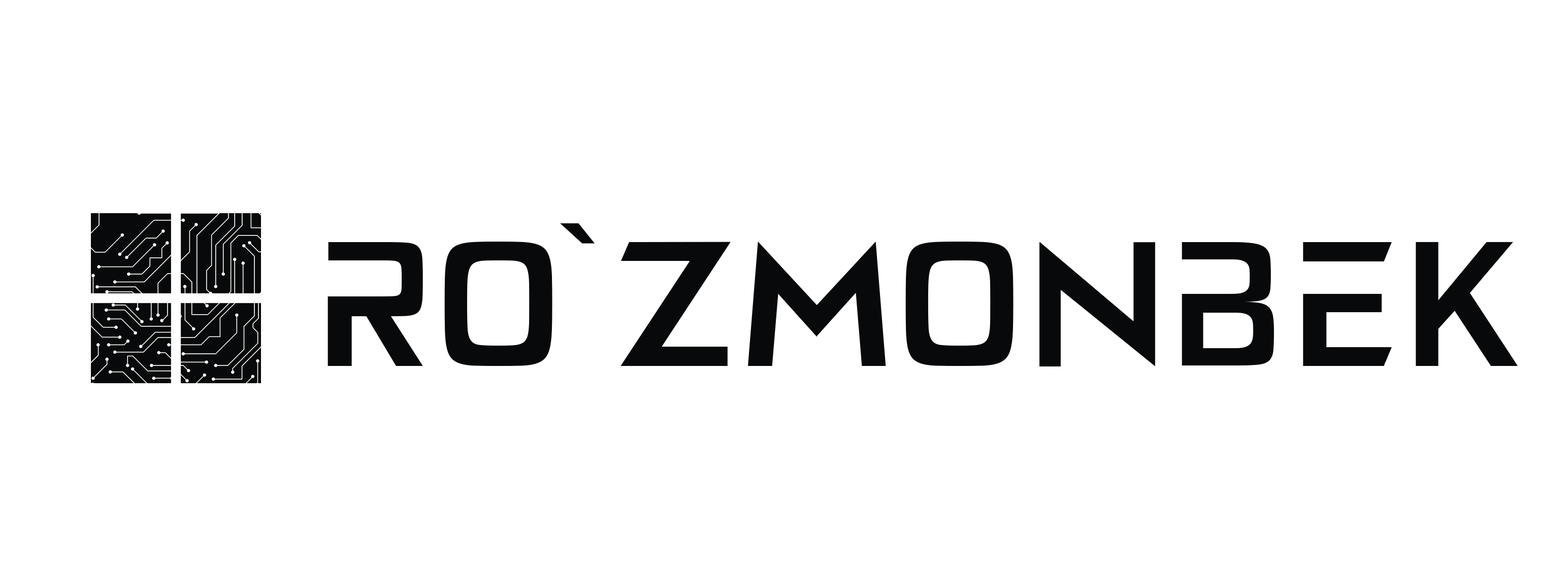
<style>
.page{position:relative;width:1568px;height:571px;background:#ffffff}
.page>*{position:absolute;margin:0}
.t1{font:172.6px "ELNATH";color:#08090a;text-transform:uppercase}
.t2{font:172.6px "MyriadPro-Regular";color:#08090a;text-transform:uppercase}
</style>
<div class="page">
<p class="t1" style="left:328px;top:223px;width:1190px;height:144px">Ro<span class="t2">`</span>zmonbek</p>
</div>
